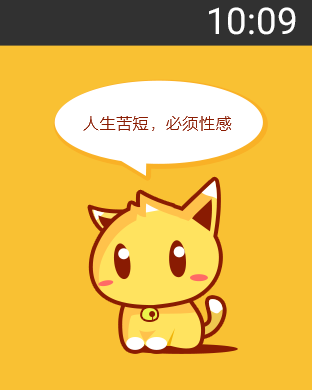
<style>
.page{position:relative;width:312px;height:390px;background:#f9c133}
.page>*{position:absolute;margin:0}
.t1{font:36.7px "Roboto-Regular";color:#ffffff}
.t2{font:16px "STHeitiSC-Light";color:#8a1c02}
</style>
<div class="page">
<p class="t1" style="left:209px;top:7px;width:87px;height:28px">10:09</p>
<p class="t2" style="left:83px;top:116px;width:149px;height:15px">人生苦短，必须性感</p>
</div>
